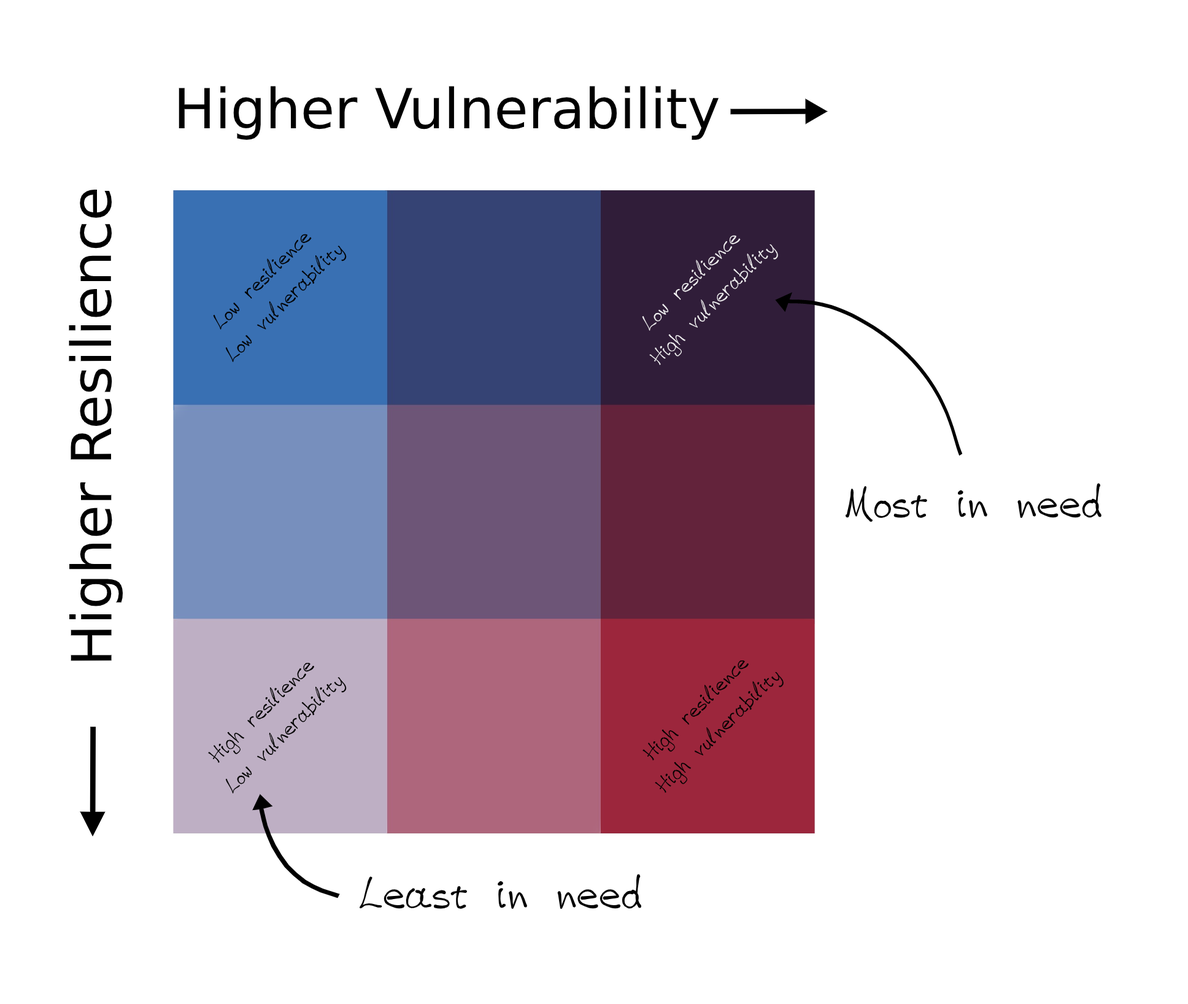
<style>
.page{position:relative;width:1188px;height:1004px;background:#ffffff}
.page>*{position:absolute;margin:0}
.t1{font:55.2px "DejaVuSans";color:#000000}
.t2{font:26.4px "VAG-HandWritten";color:#000000}
.t3{font:26.4px "VAG-HandWritten";color:#f0f0f0}
.t4{font:55.2px "VAG-HandWritten";color:#000000}
</style>
<div class="page">
<p class="t1" style="left:179px;top:86px;width:540px;height:54px">Higher Vulnerability</p>
<p class="t1" style="left:69px;top:190px;width:54px;height:471px;rotate:-90deg">Higher Resilience</p>
<p class="t2" style="left:213px;top:234px;width:134px;height:128px;text-align:center;rotate:-45deg">Low resilience<br>Low vulnerability</p>
<p class="t3" style="left:642px;top:235px;width:136px;height:131px;text-align:center;rotate:-45deg">Low resilience<br>High vulnerability</p>
<p class="t4" style="left:845px;top:482px;width:258px;height:40px">Most in need</p>
<p class="t2" style="left:208px;top:662px;width:139px;height:131px;text-align:center;rotate:-45deg">High resilience<br>Low vulnerability</p>
<p class="t2" style="left:642px;top:660px;width:142px;height:133px;text-align:center;rotate:-45deg">High resilience<br>High vulnerability</p>
<p class="t4" style="left:359px;top:873px;width:283px;height:38px">Least in need</p>
</div>
